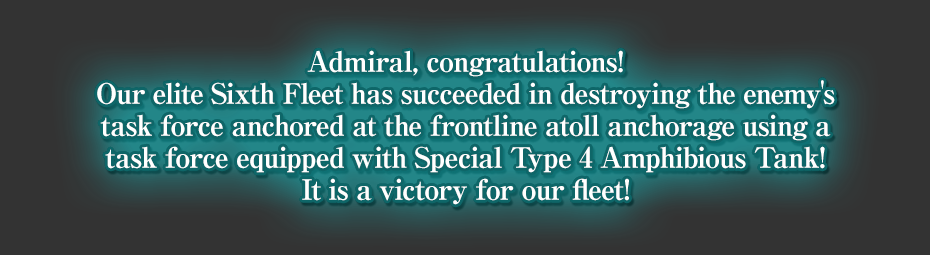
<style>
.page{position:relative;width:930px;height:255px;background:#333333}
.page>*{position:absolute;margin:0}
.t1{font:28px/32px "RyuminPro-ExBold";letter-spacing:-0.04em;color:#ffffff}
</style>
<div class="page">
<p class="t1" style="left:97px;top:50px;width:738px;height:155px;text-align:center">Admiral, congratulations!<br>Our elite Sixth Fleet has succeeded in destroying the enemy's<br>task force anchored at the frontline atoll anchorage using a<br>task force equipped with Special Type 4 Amphibious Tank!<br>It is a victory for our fleet!</p>
</div>
